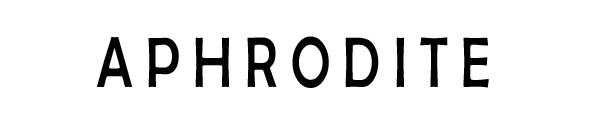
<style>
.page{position:relative;width:600px;height:138px;background:#ffffff}
.page>*{position:absolute;margin:0}
.t1{font:72px "BerlinSansFB-Reg";color:#020202;scale:0.75 1}
</style>
<div class="page">
<p class="t1" style="left:97px;top:36px;width:392px;height:52px">A P H R O D I T E</p>
</div>
